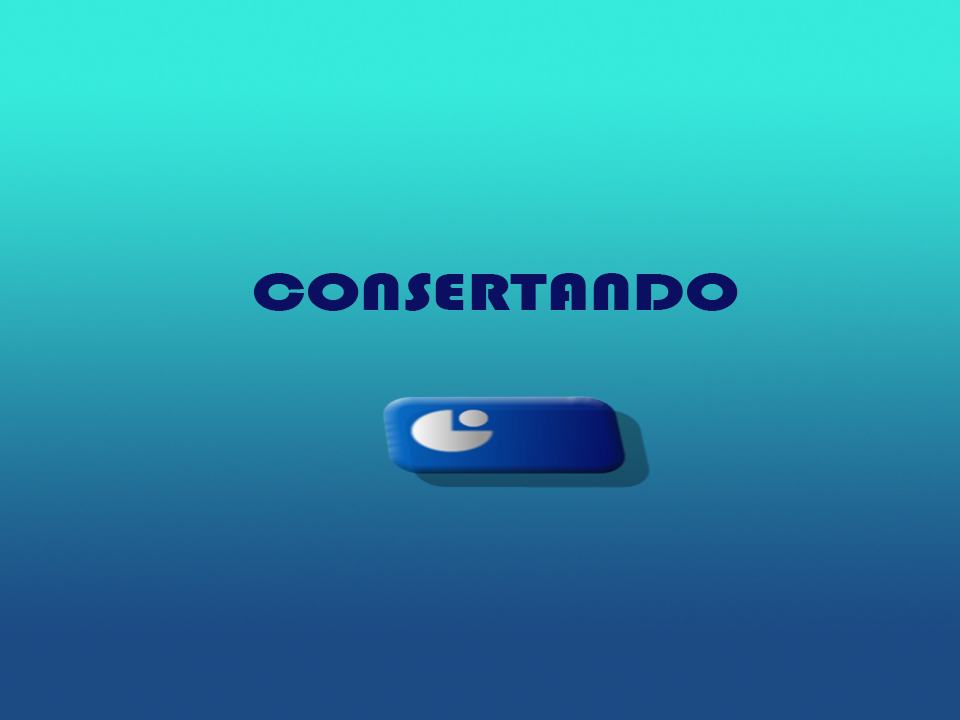
<style>
.page{position:relative;width:960px;height:720px}
.page>*{position:absolute;margin:0}
.t1{font:54px "Bauhaus93";color:#0a0f62;scale:1.33 1}
</style>
<div class="page">
<p class="t1" style="left:253px;top:273px;width:485px;height:38px">CONSERTANDO</p>
</div>
